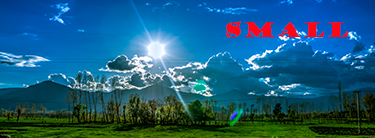
<style>
.page{position:relative;width:375px;height:138px}
.page>*{position:absolute;margin:0}
.t1{font:20px "GoudyStout";color:#fb0718}
</style>
<div class="page">
<p class="t1" style="left:225px;top:21px;width:123px;height:17px">small</p>
</div>
